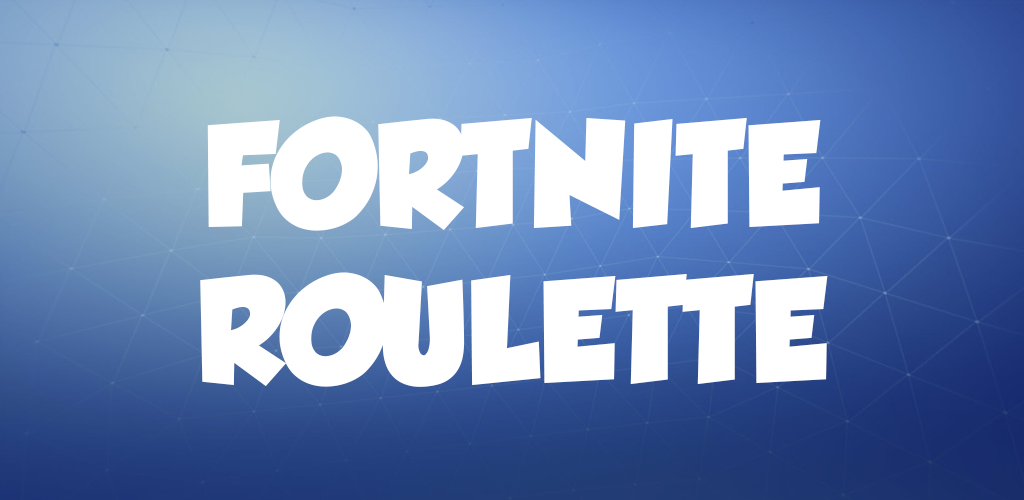
<style>
.page{position:relative;width:1024px;height:500px}
.page>*{position:absolute;margin:0}
.t1{font:130px "GROBOLD";color:#ffffff}
</style>
<div class="page">
<p class="t1" style="left:200px;top:116px;width:628px;height:271px;text-align:center">FORTNITE<br>ROULETTE</p>
</div>
